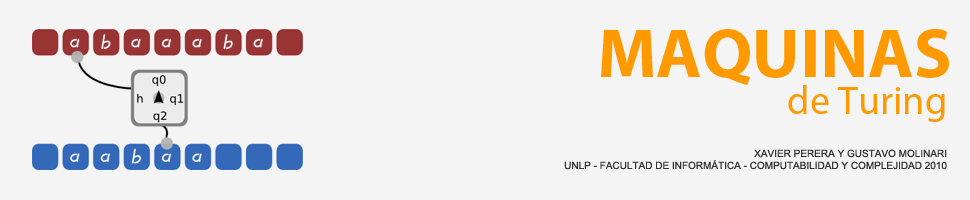
<style>
.page{position:relative;width:970px;height:200px;background:#f4f4f4}
.page>*{position:absolute;margin:0}
.t1{font:70px "MyriadPro-Bold";color:#ff9900}
.t2{font:40px "MyriadPro-Regular";color:#ff9900}
.t3{font:10px "ArialMT";color:#333333}
</style>
<div class="page">
<p class="t1" style="left:601px;top:29px;width:348px;height:57px">MAQUINAS</p>
<p class="t2" style="left:788px;top:85px;width:157px;height:37px">de Turing</p>
<p class="t3" style="left:564px;top:149px;width:383px;height:21px;text-align:right">XAVIER PERERA Y GUSTAVO MOLINARI<br>UNLP - FACULTAD DE INFORMÁTICA - COMPUTABILIDAD Y COMPLEJIDAD 2010</p>
</div>
